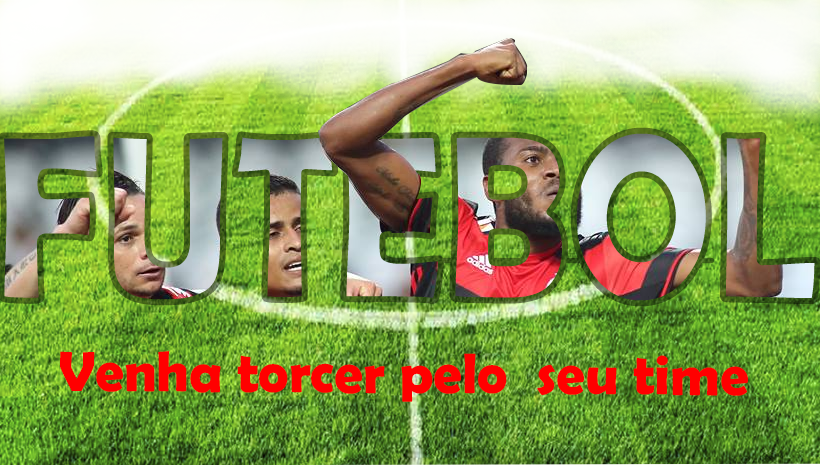
<style>
.page{position:relative;width:820px;height:465px}
.page>*{position:absolute;margin:0}
.t1{font:239.2px "BerlinSansFBDemi-Bold";scale:0.81 1}
.t2{font:57.2px "BerlinSansFBDemi-Bold";color:#ff0000}
</style>
<div class="page">
<p class="t1" style="left:1px;top:130px;width:817px;height:174px">FUTEBOL</p>
<p class="t2" style="left:60px;top:351px;width:688px;height:51px">Venha torcer pelo  seu time</p>
</div>
